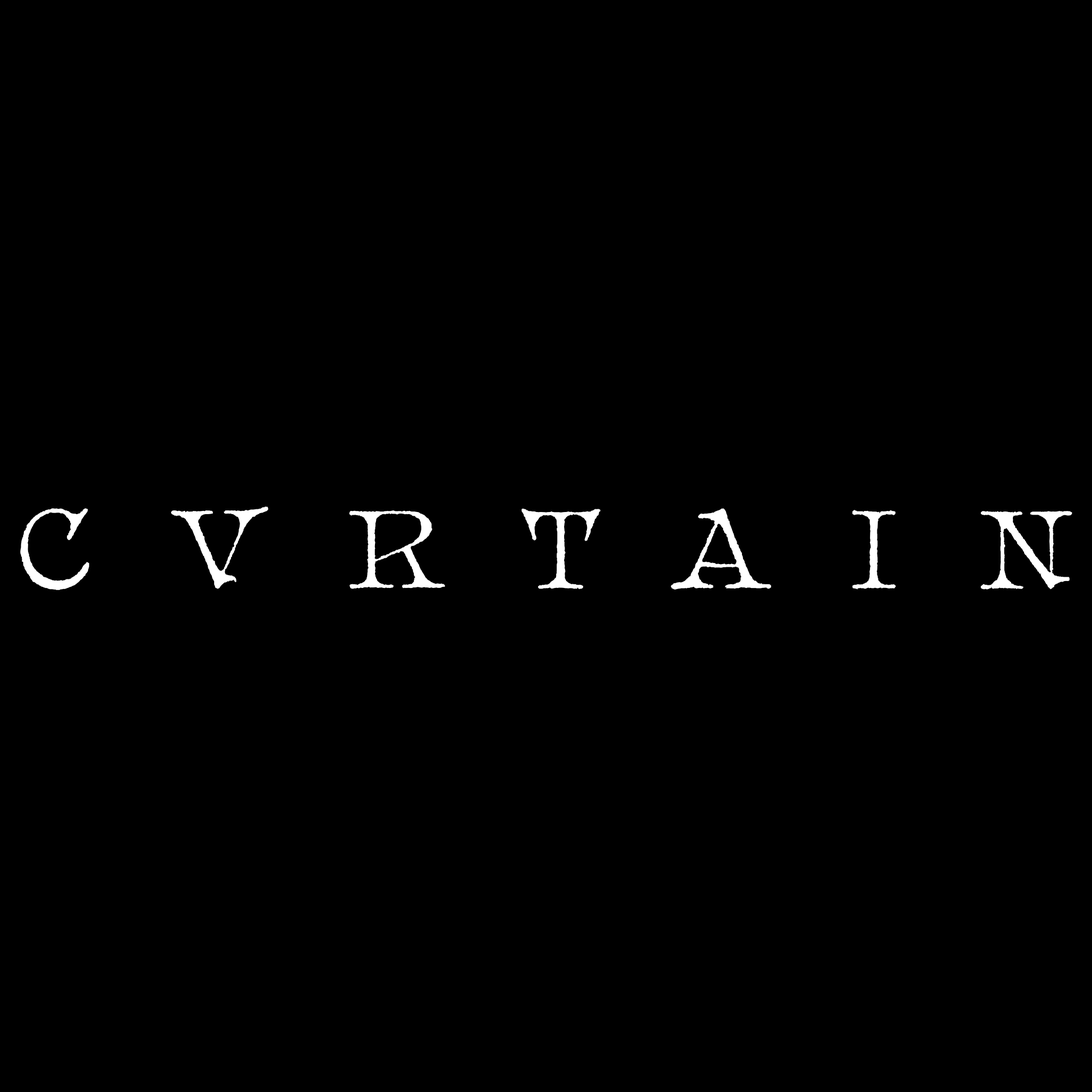
<style>
.page{position:relative;width:1092px;height:1092px;background:#000000}
.page>*{position:absolute;margin:0}
.t1{font:113.5px "InigoWF";letter-spacing:0.645em;color:#ffffff}
</style>
<div class="page">
<p class="t1" style="left:20px;top:506px;width:1052px;height:84px">CVRTAIN</p>
</div>
